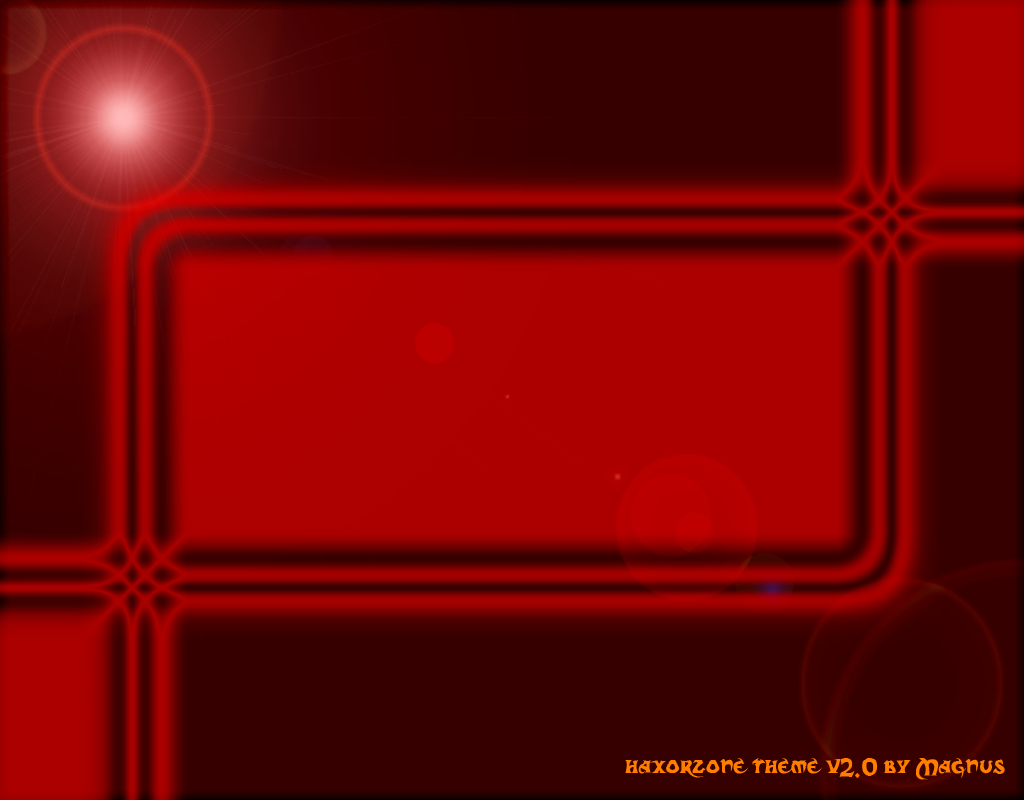
<style>
.page{position:relative;width:1024px;height:800px}
.page>*{position:absolute;margin:0}
.t1{font:24px "DarkCrystalScript";color:#ff7d00;scale:0.96 1}
</style>
<div class="page">
<p class="t1" style="left:625px;top:758px;width:380px;height:22px">haxorzone theme v2.0 by Magnus</p>
</div>
